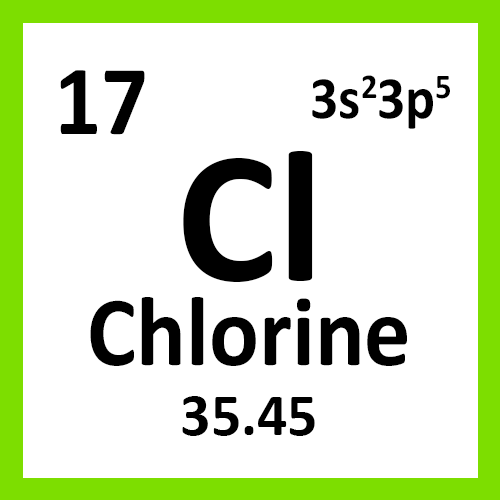
<style>
.page{position:relative;width:500px;height:500px;background:#ffffff}
.page>*{position:absolute;margin:0}
.t1{font:100px "Calibri-Bold";color:#000000;scale:0.93 1}
.t2{font:60px "Calibri-Bold";color:#000000;scale:0.93 1}
.t3{font:190px "Calibri-Bold";color:#000000}
.t4{font:60px "Calibri-Bold";color:#000000}
</style>
<div class="page">
<p class="t1" style="left:60px;top:70px;width:85px;height:65px">17</p>
<p class="t2" style="left:312px;top:75px;width:138px;height:54px">3s23p5</p>
<p class="t3" style="left:183px;top:151px;width:130px;height:131px">Cl</p>
<p class="t1" style="left:90px;top:297px;width:317px;height:69px">Chlorine</p>
<p class="t4" style="left:182px;top:396px;width:133px;height:40px">35.45</p>
</div>
